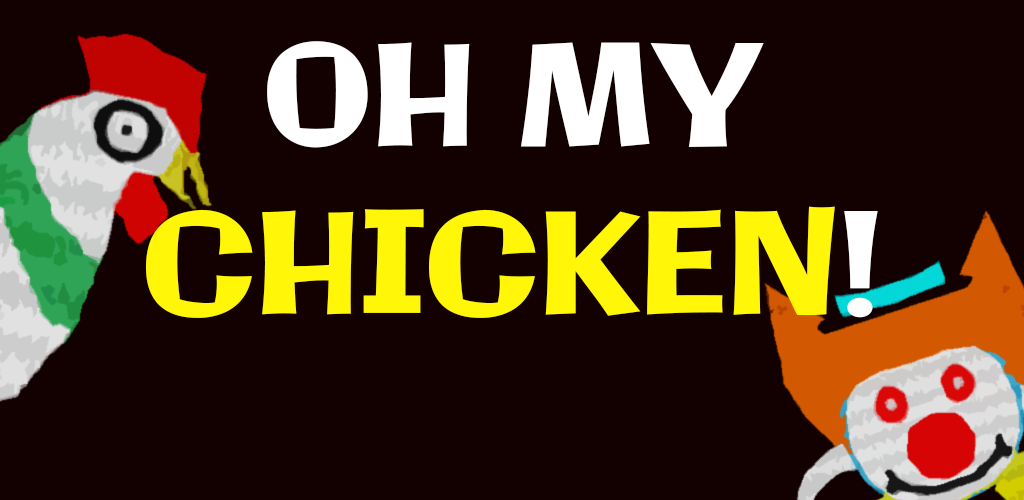
<style>
.page{position:relative;width:1024px;height:500px;background:#130000}
.page>*{position:absolute;margin:0}
.t1{font:139.8px "Galindo-Regular";color:#fff608}
.t2{font:139.8px "Galindo-Regular";color:#ffffff}
</style>
<div class="page">
<p class="t1" style="left:146px;top:41px;width:732px;height:277px;text-align:center"><span class="t2">OH MY </span>CHICKEN<span class="t2">!</span></p>
</div>
